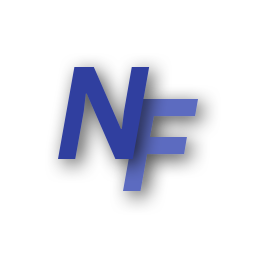
<style>
.page{position:relative;width:256px;height:256px;background:#ffffff}
.page>*{position:absolute;margin:0}
.t1{font:129.4px "ProductSans-BoldItalic";letter-spacing:-0.22em;color:#303f9f}
.t2{font:129.4px "ProductSans-BoldItalic";letter-spacing:-0.22em}
</style>
<div class="page">
<p class="t1" style="left:58px;top:67px;width:92px;height:92px">N</p>
<p class="t2" style="left:123px;top:99px;width:75px;height:92px">F</p>
</div>
